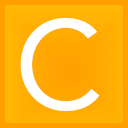
<style>
.page{position:relative;width:128px;height:128px}
.page>*{position:absolute;margin:0}
.t1{font:125px "AvenirLTStd-Roman";color:#ffffff}
</style>
<div class="page">
<p class="t1" style="left:20px;top:18px;width:80px;height:93px">C</p>
</div>
